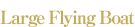
<style>
.page{position:relative;width:135px;height:27px;background:#ffffff}
.page>*{position:absolute;margin:0}
.t1{font:18px "RyuminPro-ExBold";letter-spacing:-0.084em;color:#c4a956}
</style>
<div class="page">
<p class="t1" style="left:0px;top:10px;width:135px;height:17px">Large Flying Boat</p>
</div>
